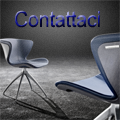
<style>
.page{position:relative;width:120px;height:120px}
.page>*{position:absolute;margin:0}
.t1{font:22px "ArialMT";scale:0.88 1}
</style>
<div class="page">
<p class="t1" style="left:15px;top:10px;width:85px;height:18px">Contattaci</p>
</div>
